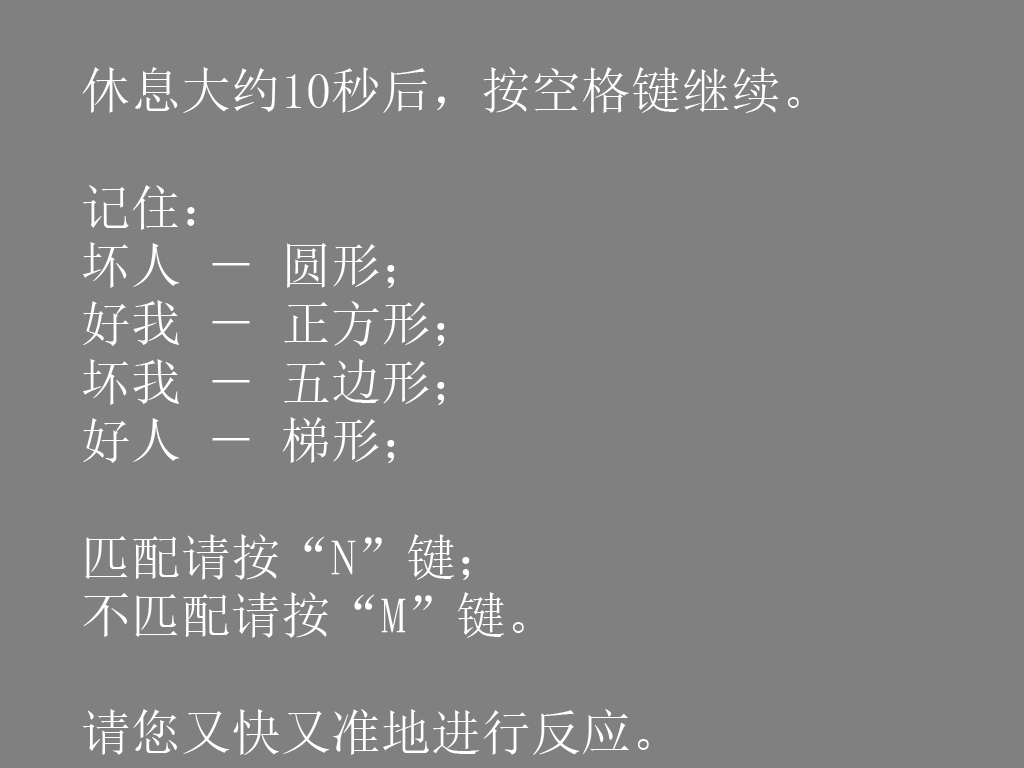
<style>
.page{position:relative;width:1024px;height:768px;background:#808080}
.page>*{position:absolute;margin:0}
.t1{font:50px/58.3px "SimSun";color:#ffffff}
</style>
<div class="page">
<p class="t1" style="left:82px;top:67px;width:717px;height:688px">休息大约10秒后，按空格键继续。<br><br>记住： <br>坏人 － 圆形；<br>好我 － 正方形；<br>坏我 － 五边形；<br>好人 － 梯形；<br><br>匹配请按“N”键；<br>不匹配请按“M”键。<br><br>请您又快又准地进行反应。</p>
</div>
